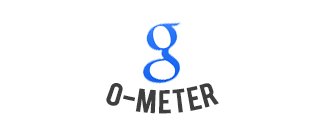
<style>
.page{position:relative;width:328px;height:136px;background:#ffffff}
.page>*{position:absolute;margin:0}
.t1{font:25.6px "Bebas";letter-spacing:0.02em;color:#3e3e3e}
</style>
<div class="page">
<p class="t1" style="left:106px;top:83px;width:113px;height:31px">o-meter</p>
</div>
